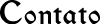
<style>
.page{position:relative;width:102px;height:24px;background:#ffffff}
.page>*{position:absolute;margin:0}
.t1{font:24px "Kelmscott-Regular";letter-spacing:0.05em;color:#000000}
.t2{font:30px "Kelmscott-Regular";letter-spacing:0.05em;color:#000000}
</style>
<div class="page">
<p class="t1" style="left:0px;top:0px;width:100px;height:24px"><span class="t2">C</span>ontato</p>
</div>
